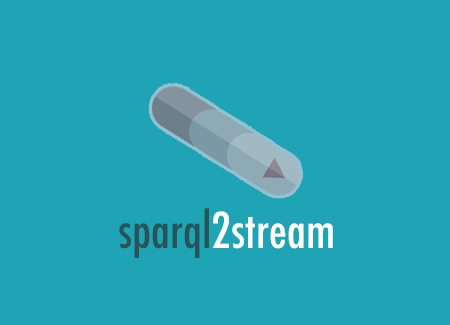
<style>
.page{position:relative;width:450px;height:325px;background:#1fa4b6}
.page>*{position:absolute;margin:0}
.t1{font:48px "Futura-CondensedMedium";color:#ffffff}
.t2{font:48px "Futura-CondensedMedium";color:#285359}
</style>
<div class="page">
<p class="t1" style="left:119px;top:208px;width:214px;height:50px"><span class="t2">sparql</span>2stream</p>
</div>
